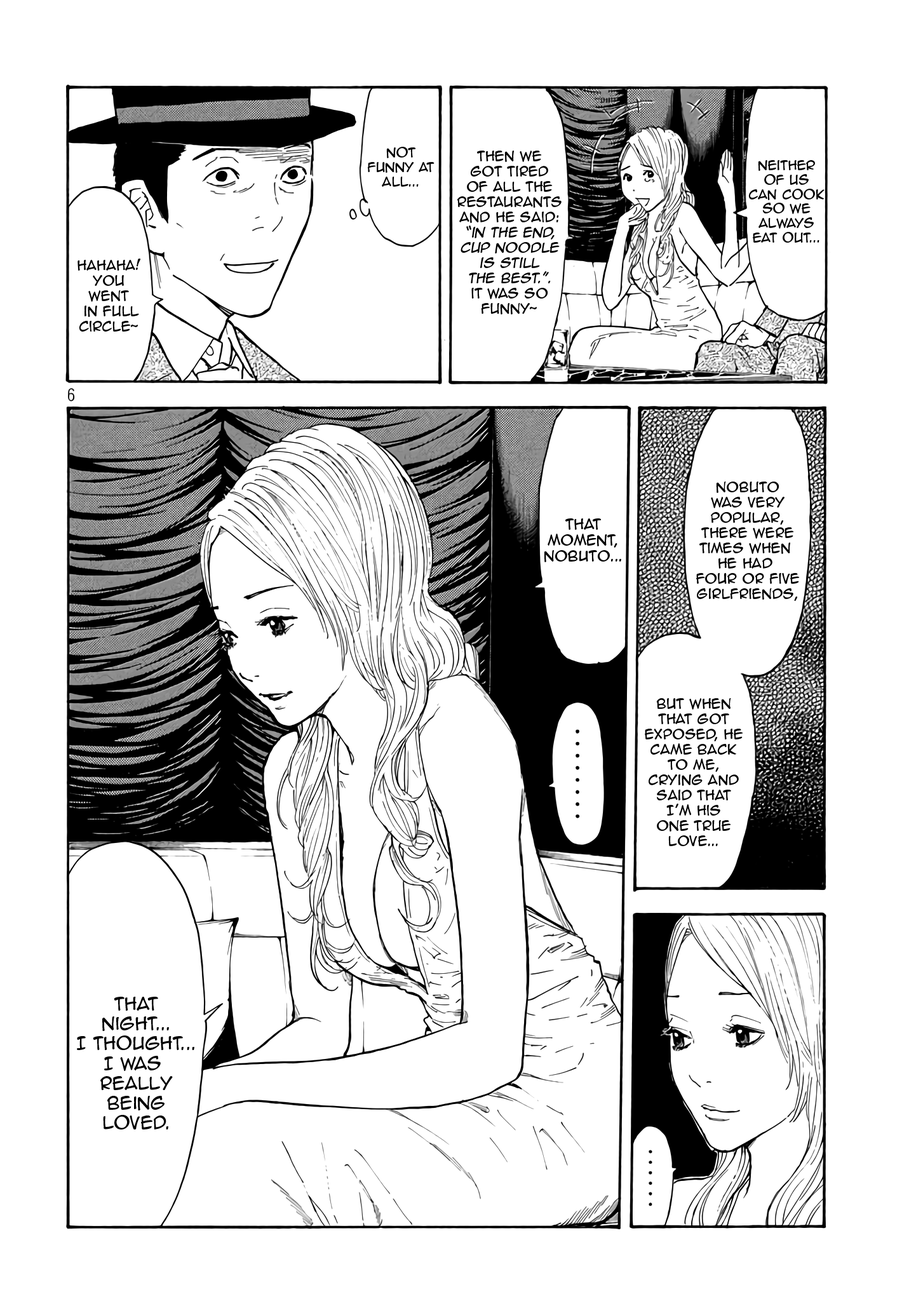
<style>
.page{position:relative;width:916px;height:1301px;background:#ffffff}
.page>*{position:absolute;margin:0}
.t1{font:12.1px "AnimeAce2.0BB";color:#000000}
.t2{font:12.7px "AnimeAce2.0BB";color:#000000}
.t3{font:12.7px "AnimeAce2.0BB";color:#000000;font-style:italic}
.t4{font:13.3px "AnimeAce2.0BB";color:#000000}
.t5{font:16.5px "AnimeAce2.0BB";color:#000000}
</style>
<div class="page">
<p class="t1" style="left:367px;top:147px;width:68px;height:40px;text-align:center">Not<br>Funny at<br>All...</p>
<p class="t2" style="left:457px;top:151px;width:105px;height:164px;text-align:center">then We<br>got tired<br>of all the<br>restaurants<br>and he said:<br><span class="t3">“in the end,<br>cup noodle<br>is still<br>the best.”.<br></span>it was so<br>funny~</p>
<p class="t1" style="left:749px;top:160px;width:76px;height:83px;text-align:center">Neither<br>of us<br>can cook<br>so we<br>always<br>eat out...</p>
<p class="t2" style="left:78px;top:259px;width:63px;height:73px;text-align:center">Hahaha!<br>you<br>went<br> in full<br>circle~</p>
<p class="t2" style="left:696px;top:482px;width:104px;height:119px;text-align:center">Nobuto<br>was very<br>popular,<br>there were<br>times when <br>he had <br>four or five<br>girlfriends,</p>
<p class="t4" style="left:544px;top:519px;width:77px;height:43px;text-align:center">THat<br>moment,<br>nobuto...</p>
<p class="t2" style="left:645px;top:698px;width:98px;height:148px;text-align:center">but when<br>that got<br>Exposed, He<br>came back<br>to me,<br>crying and<br>said that<br>I’m His<br>one True<br>Love...</p>
<p class="t5" style="left:77px;top:997px;width:117px;height:133px;text-align:center">That<br>Night...<br>I thought...<br>I was <br>really<br>Being<br>loved.</p>
</div>
